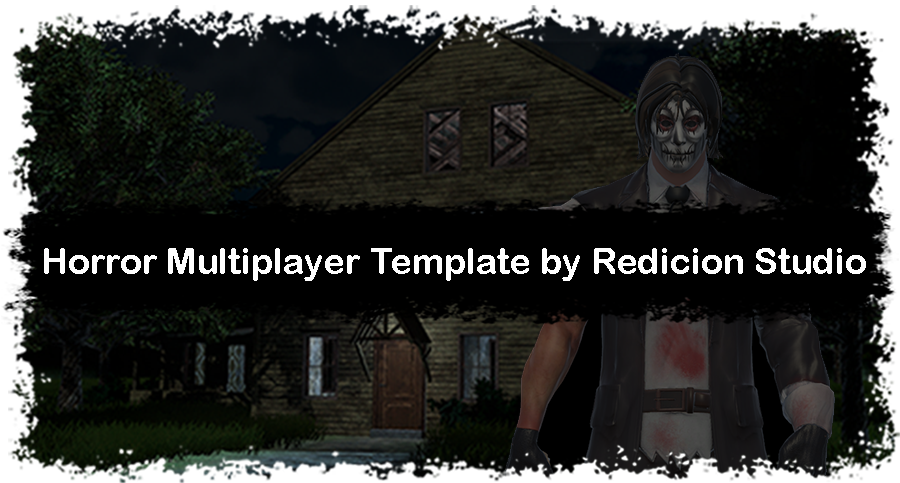
<style>
.page{position:relative;width:900px;height:483px;background:#000000}
.page>*{position:absolute;margin:0}
.t1{font:36.1px "ArialRoundedMTBold";color:#ffffff}
</style>
<div class="page">
<p class="t1" style="left:44px;top:248px;width:822px;height:33px">Horror Multiplayer Template by Redicion Studio</p>
</div>
